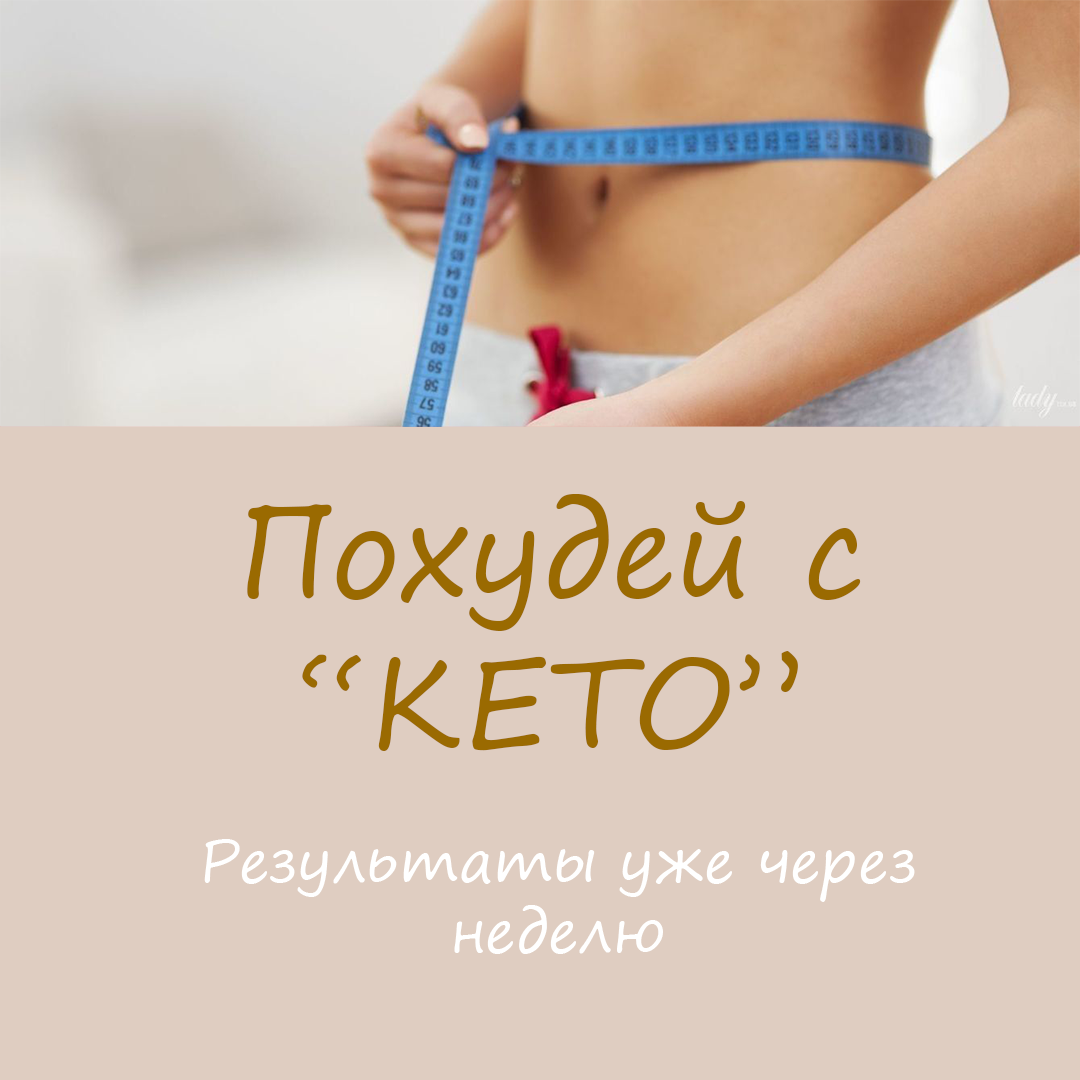
<style>
.page{position:relative;width:1080px;height:1080px;background:#dfcdc1}
.page>*{position:absolute;margin:0}
.t1{font:125px "SegoePrint";color:#9a6a01}
.t2{font:58.3px "SegoePrint";color:#ffffff}
</style>
<div class="page">
<p class="t1" style="left:247px;top:494px;width:614px;height:257px;text-align:center">Похудей с “KETO”</p>
<p class="t2" style="left:204px;top:839px;width:711px;height:115px;text-align:center">Результаты уже через неделю</p>
</div>
